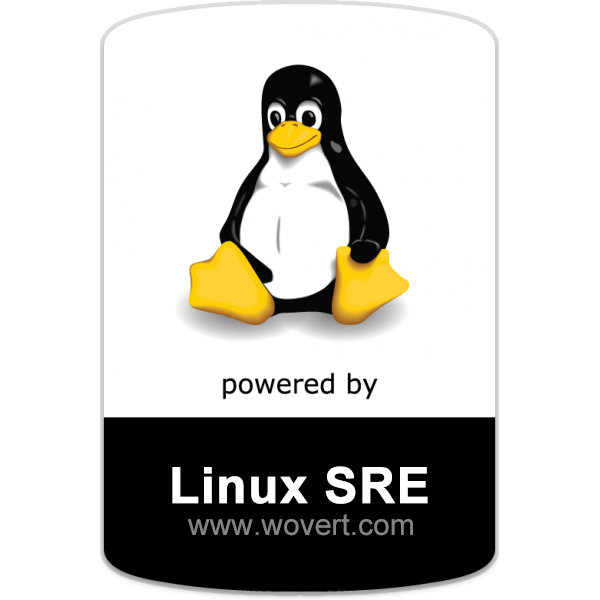
<style>
.page{position:relative;width:600px;height:600px;background:#ffffff}
.page>*{position:absolute;margin:0}
.t1{font:50px "Arial-BoldMT";color:#ffffff;font-weight:bold}
.t2{font:30px "ArialMT";color:#848484}
</style>
<div class="page">
<p class="t1" style="left:172px;top:466px;width:256px;height:38px">Linux SRE</p>
<p class="t2" style="left:188px;top:514px;width:225px;height:22px">www.wovert.com</p>
</div>
